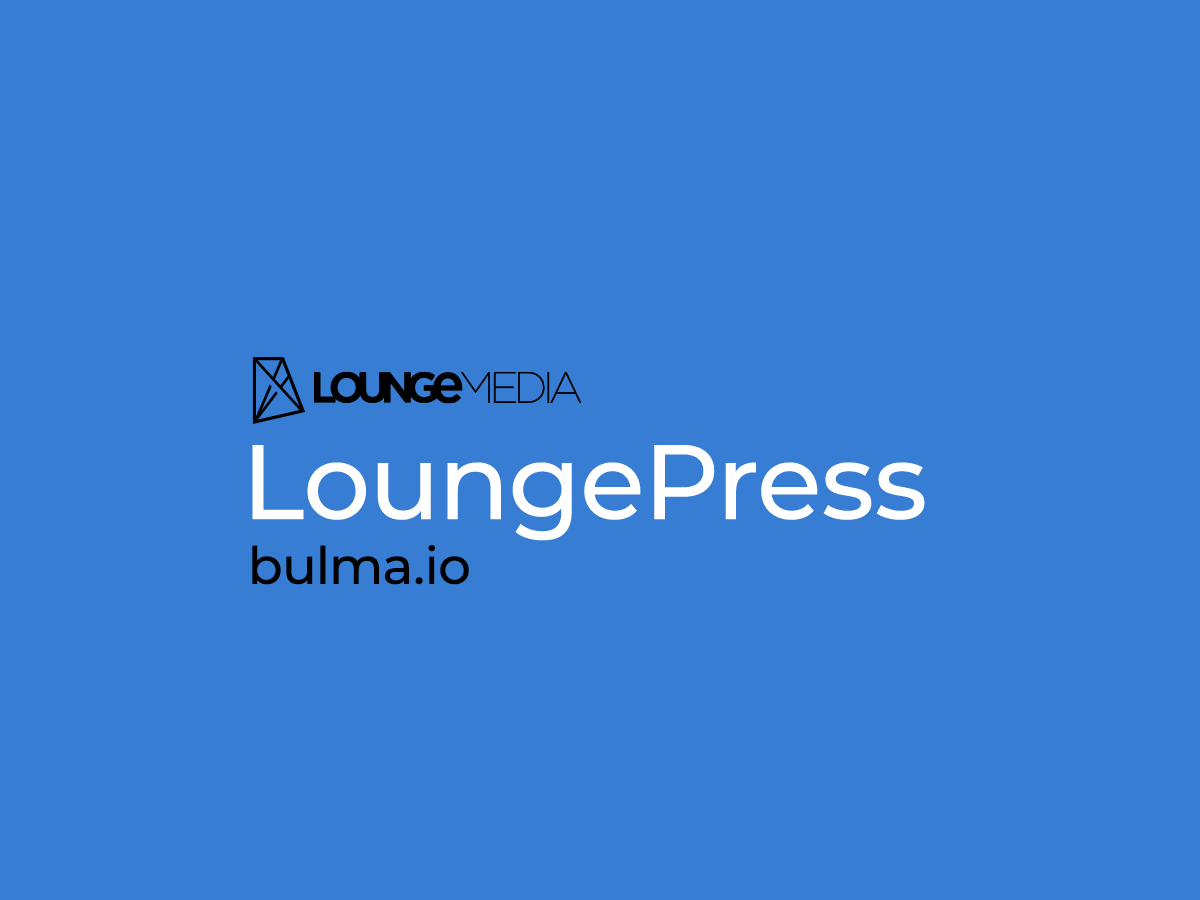
<style>
.page{position:relative;width:1200px;height:900px;background:#377dd3}
.page>*{position:absolute;margin:0}
.t1{font:105.7px "Montserrat-Medium";color:#ffffff}
.t2{font:51.5px "Montserrat-Medium";color:#000000}
</style>
<div class="page">
<p class="t1" style="left:252px;top:445px;width:673px;height:96px">LoungePress</p>
<p class="t2" style="left:252px;top:544px;width:217px;height:41px">bulma.io</p>
</div>
